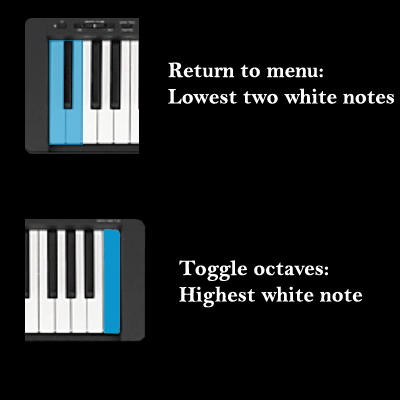
<style>
.page{position:relative;width:400px;height:400px;background:#000000}
.page>*{position:absolute;margin:0}
.t1{font:22px "BellMTBold";color:#ffffff}
</style>
<div class="page">
<p class="t1" style="left:168px;top:62px;width:226px;height:42px">Return to menu: <br>Lowest two white notes</p>
<p class="t1" style="left:179px;top:260px;width:184px;height:48px">Toggle octaves:<br>Highest white note</p>
</div>
